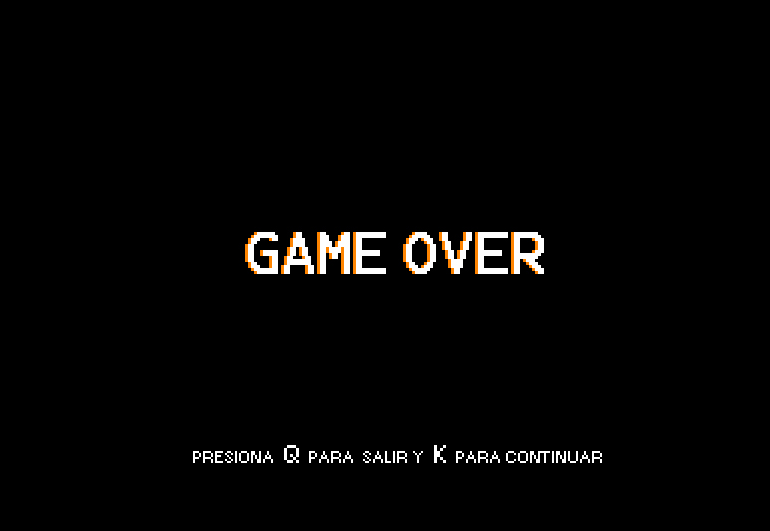
<style>
.page{position:relative;width:770px;height:531px;background:#000000}
.page>*{position:absolute;margin:0}
.t1{font:17px "Small Fonts";color:#ffffff;text-transform:uppercase}
.t2{font:24px "Small Fonts";color:#ffffff;text-transform:uppercase}
</style>
<div class="page">
<p class="t1" style="left:193px;top:445px;width:409px;height:18px">Presiona  <span class="t2">Q</span>  para  salir y  <span class="t2">K</span>  para continuar</p>
</div>
